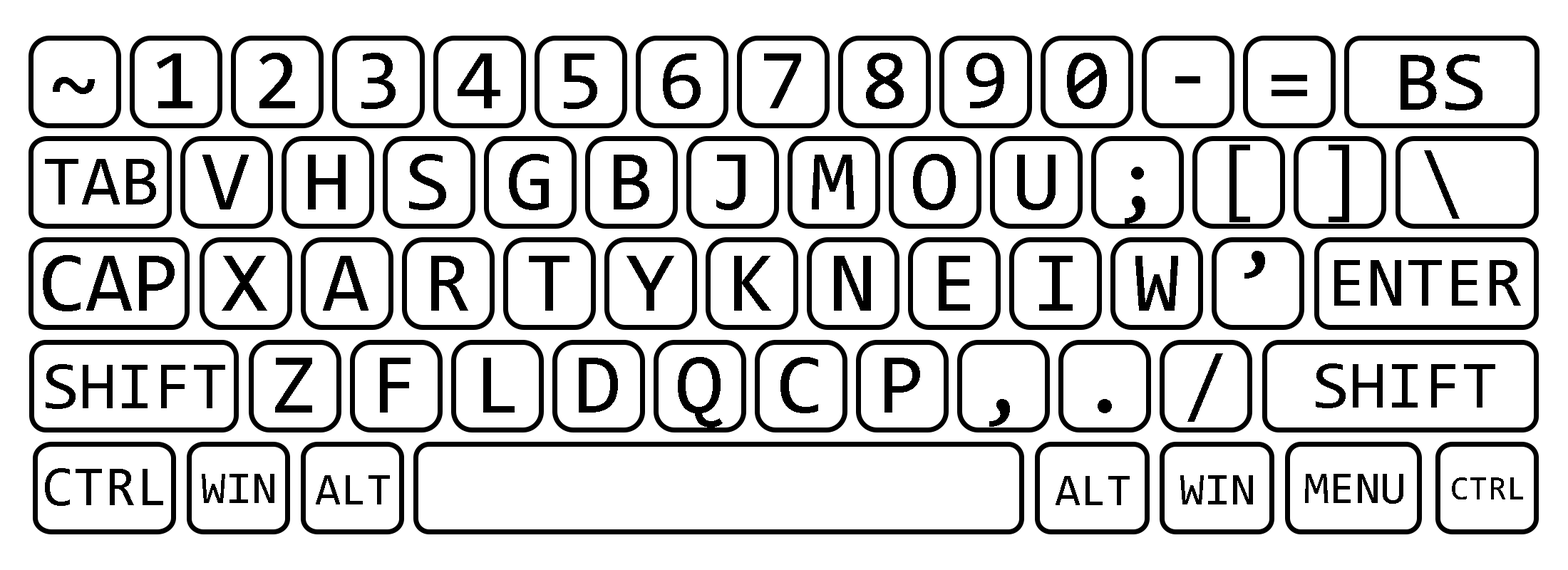
<style>
.page{position:relative;width:1568px;height:570px;background:#ffffff}
.page>*{position:absolute;margin:0}
.t1{font:85.5px "Consolas";letter-spacing:0.635em;color:#000000;text-transform:uppercase}
.t2{font:85.8px "Consolas";color:#000000;text-transform:uppercase}
.t3{font:71.3px "Consolas";color:#000000;text-transform:uppercase}
.t4{font:85.5px "Consolas";color:#000000;text-transform:uppercase}
.t5{font:67.7px "Consolas";color:#000000;text-transform:uppercase}
.t6{font:57px "Consolas";color:#000000;text-transform:uppercase}
.t7{font:46.3px "Consolas";color:#000000;text-transform:uppercase}
.t8{font:34.3px "Consolas";color:#000000;text-transform:uppercase}
</style>
<div class="page">
<p class="t1" style="left:53px;top:53px;width:1254px;height:56px">~1234567890-=</p>
<p class="t2" style="left:1401px;top:54px;width:81px;height:56px">BS</p>
<p class="t1" style="left:202px;top:145px;width:1258px;height:79px">vhsgbjmou;[]\</p>
<p class="t3" style="left:45px;top:159px;width:111px;height:46px">tab</p>
<p class="t4" style="left:43px;top:255px;width:132px;height:56px">CAP</p>
<p class="t1" style="left:222px;top:251px;width:1043px;height:60px">xartykneiw’</p>
<p class="t3" style="left:1334px;top:260px;width:187px;height:46px">ENTER</p>
<p class="t1" style="left:275px;top:354px;width:948px;height:74px">zfldqcp,./</p>
<p class="t5" style="left:46px;top:364px;width:179px;height:45px">SHIFT</p>
<p class="t5" style="left:1316px;top:363px;width:179px;height:45px">SHIFT</p>
<p class="t6" style="left:45px;top:468px;width:118px;height:38px">CTRL</p>
<p class="t7" style="left:202px;top:474px;width:72px;height:29px">WIN</p>
<p class="t7" style="left:1305px;top:474px;width:98px;height:30px">MENU</p>
<p class="t7" style="left:316px;top:475px;width:74px;height:30px">ALT</p>
<p class="t7" style="left:1056px;top:476px;width:74px;height:29px">ALT</p>
<p class="t7" style="left:1180px;top:475px;width:73px;height:30px">WIN</p>
<p class="t7" style="left:1180px;top:475px;width:73px;height:30px">WIN</p>
<p class="t8" style="left:1452px;top:478px;width:71px;height:22px">CTRL</p>
</div>
